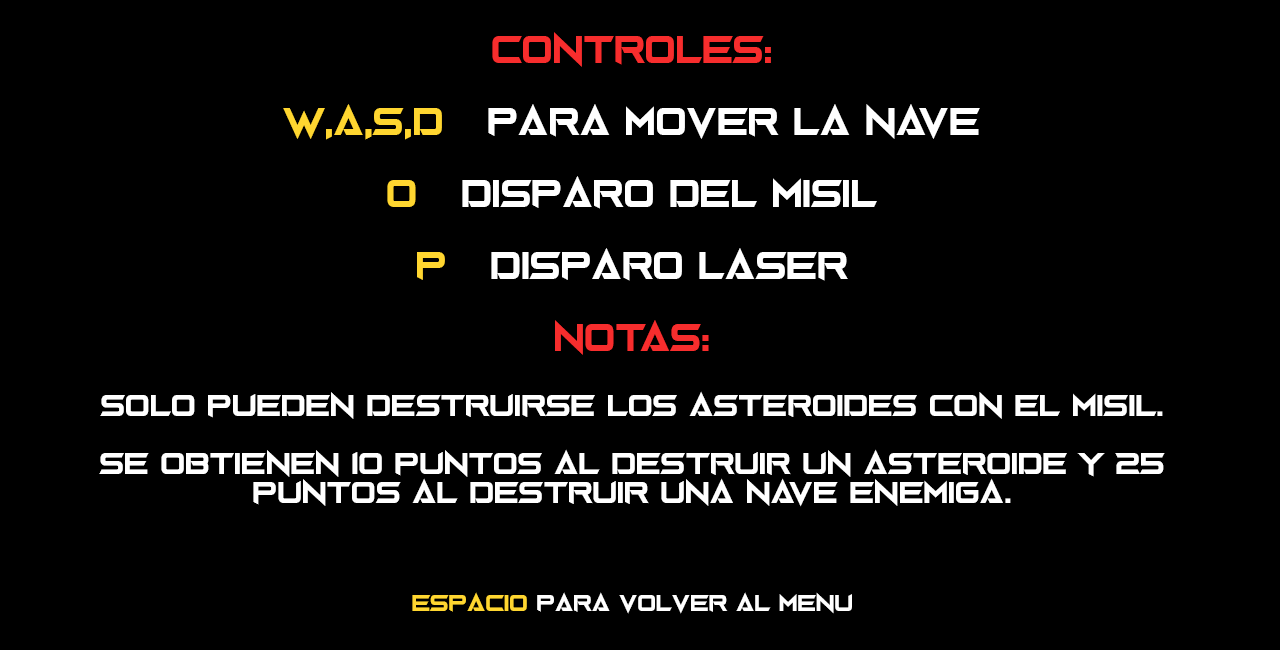
<style>
.page{position:relative;width:1280px;height:650px;background:#000000}
.page>*{position:absolute;margin:0}
.t1{font:24px "Gravedigger";color:#ffffff}
.t2{font:30px "Gravedigger";color:#f72d2d}
.t3{font:30px "Gravedigger";color:#ffd630}
.t4{font:30px "Gravedigger";color:#ffffff}
.t5{font:18px "Gravedigger";color:#ffd630}
.t6{font:18px "Gravedigger";color:#ffffff}
</style>
<div class="page">
<p class="t1" style="left:99px;top:32px;width:1066px;height:582px;text-align:center"><span class="t2">controles:<br></span><span class="t3"><br>w,a,s,d      </span><span class="t4">para  mover  la  nave<br></span><span class="t3"><br>o      </span><span class="t4">disparo  del  misil<br></span><span class="t3"><br>p      </span><span class="t4">disparo  laser<br><br></span><span class="t2">notas:<br><br></span>solo  pueden  destruirse  los  asteroides  con  el  misil.<br><br>se  obtienen  10  puntos  al  destruir  un  asteroide  y  25  puntos  al  destruir  una  nave  enemiga.<br><br><br><br><span class="t5">Espacio</span><span class="t6">  para  volver  al  menu</span></p>
</div>
